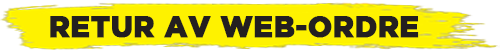
<style>
.page{position:relative;width:500px;height:53px;background:#fef200}
.page>*{position:absolute;margin:0}
.t1{font:30px "GothamBlack";letter-spacing:0.01em;color:#231f20;font-weight:bold;scale:0.96 1}
</style>
<div class="page">
<p class="t1" style="left:50px;top:16px;width:369px;height:22px">RETUR AV WEB-ORDRE</p>
</div>
